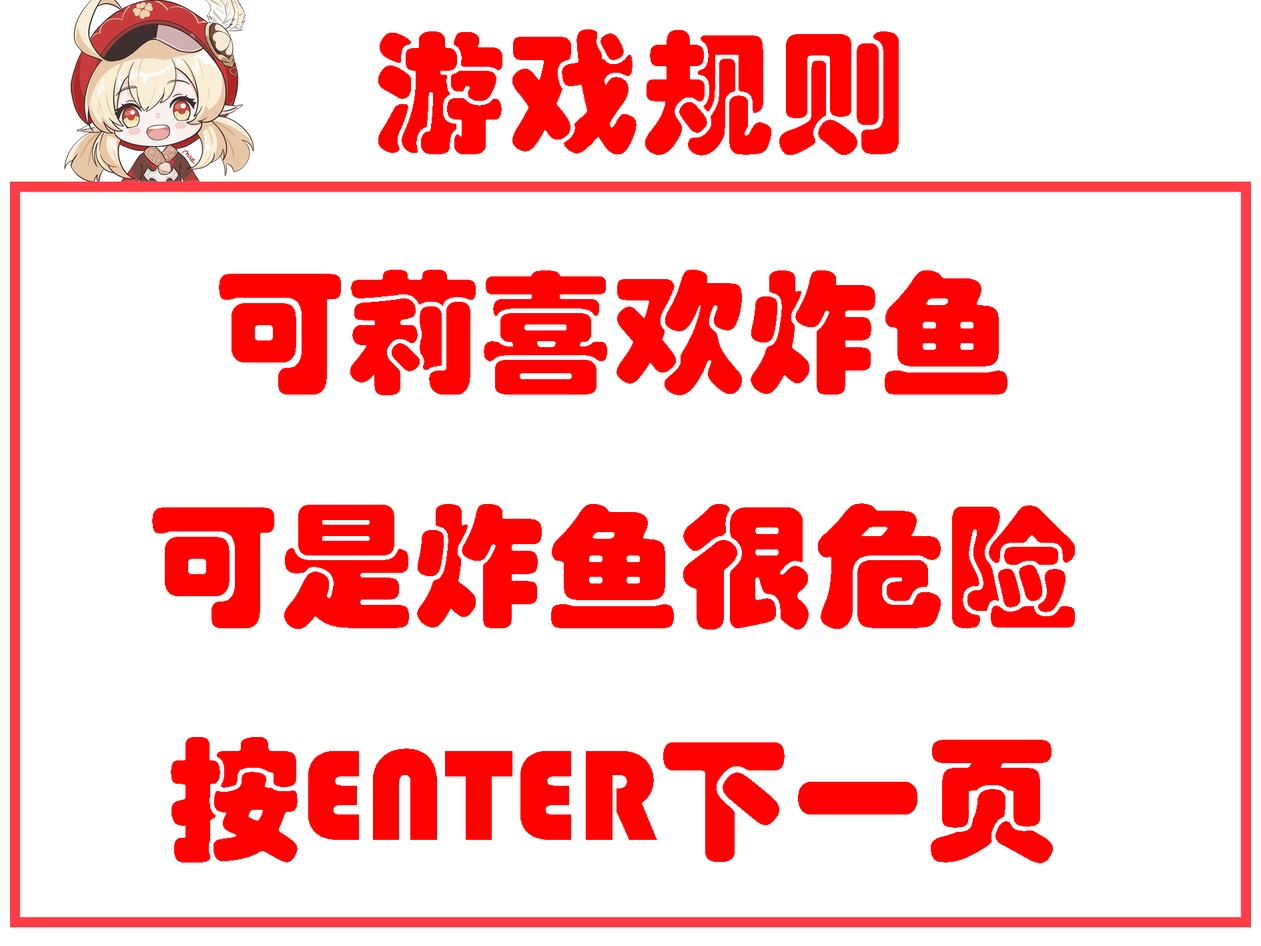
<style>
.page{position:relative;width:1261px;height:946px;background:#ffffff}
.page>*{position:absolute;margin:0}
.t1{font:133.5px "STHupo";color:#ff0000}
</style>
<div class="page">
<p class="t1" style="left:378px;top:29px;width:521px;height:126px">游戏规则</p>
<p class="t1" style="left:152px;top:270px;width:923px;height:593px;text-align:center">可莉喜欢炸鱼<br>可是炸鱼很危险<br>按ENTER下一页</p>
</div>
